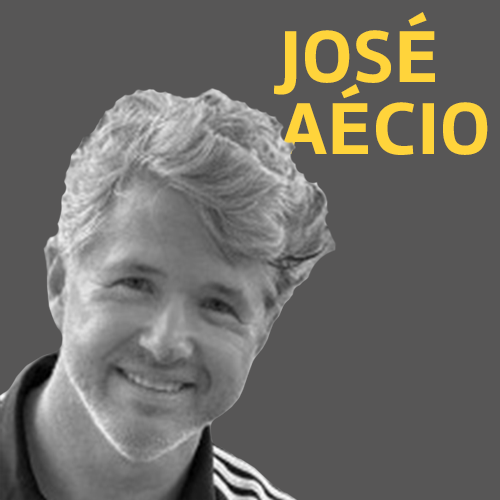
<style>
.page{position:relative;width:500px;height:500px;background:#575656}
.page>*{position:absolute;margin:0}
.t1{font:76px/72px "Amelia-Basic-Bold";letter-spacing:0.025em;color:#ffd43b}
</style>
<div class="page">
<p class="t1" style="left:274px;top:12px;width:214px;height:143px">JOSÉ<br>AÉCIO</p>
</div>
